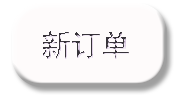
<style>
.page{position:relative;width:180px;height:100px;background:#fefbfb}
.page>*{position:absolute;margin:0}
.t1{font:30px "SimHei"}
</style>
<div class="page">
<p class="t1" style="left:43px;top:31px;width:86px;height:28px">新订单</p>
</div>
